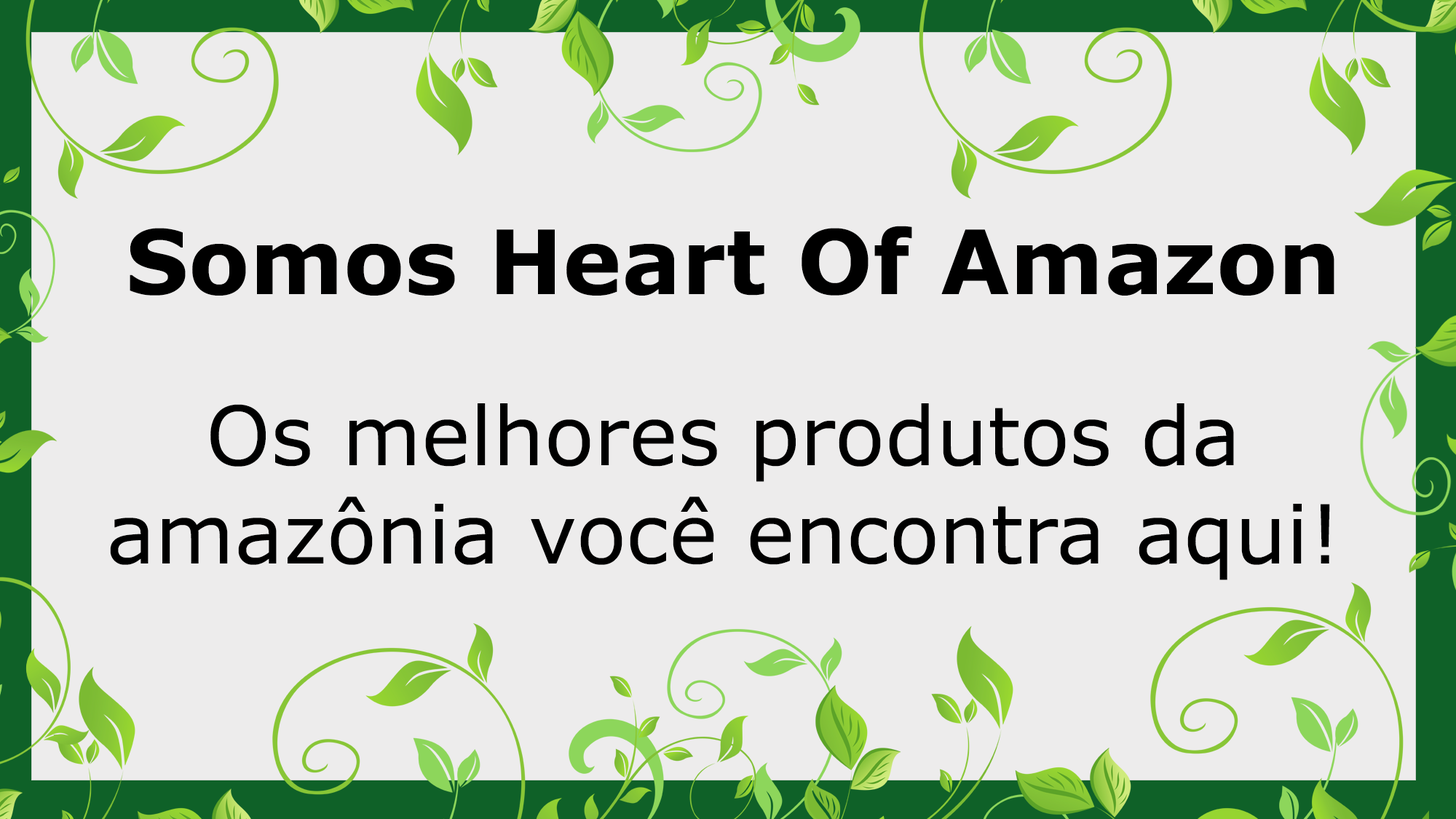
<style>
.page{position:relative;width:1456px;height:819px;background:#edecec}
.page>*{position:absolute;margin:0}
.t1{font:88.8px "Verdana-Bold";letter-spacing:0.002em;color:#000000}
.t2{font:81.5px "Verdana";letter-spacing:0.002em;color:#000000}
</style>
<div class="page">
<p class="t1" style="left:130px;top:226px;width:1204px;height:70px">Somos Heart Of Amazon</p>
<p class="t2" style="left:110px;top:403px;width:1220px;height:177px;text-align:center">Os melhores produtos da amazônia você encontra aqui!</p>
</div>
